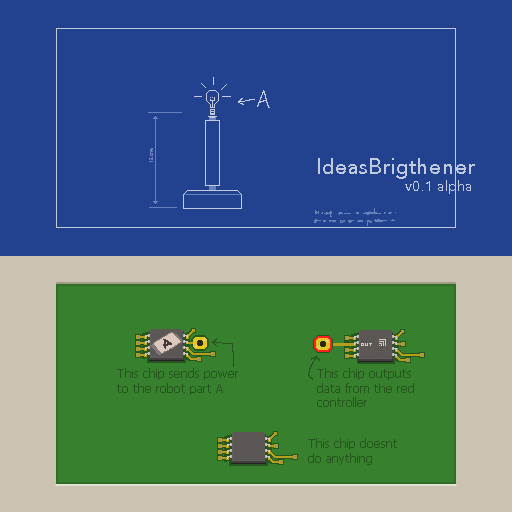
<style>
.page{position:relative;width:512px;height:512px;background:#22428f}
.page>*{position:absolute;margin:0}
.t1{font:22.1px "Avenir-Roman";color:#c2cade}
.t2{font:14px "Avenir-Roman";color:#c2cade}
.t3{font:12px "Tahoma";color:#25561d}
</style>
<div class="page">
<p class="t1" style="left:318px;top:158px;width:157px;height:21px">IdeasBrigthener</p>
<p class="t2" style="left:405px;top:180px;width:66px;height:14px">v0.1 alpha</p>
<p class="t3" style="left:117px;top:368px;width:121px;height:27px">This chip sends power<br>to the robot part A</p>
<p class="t3" style="left:317px;top:368px;width:97px;height:39px">This chip outputs<br>data from the red <br>controller</p>
<p class="t3" style="left:308px;top:438px;width:89px;height:27px">This chip doesnt<br>do anything</p>
</div>
